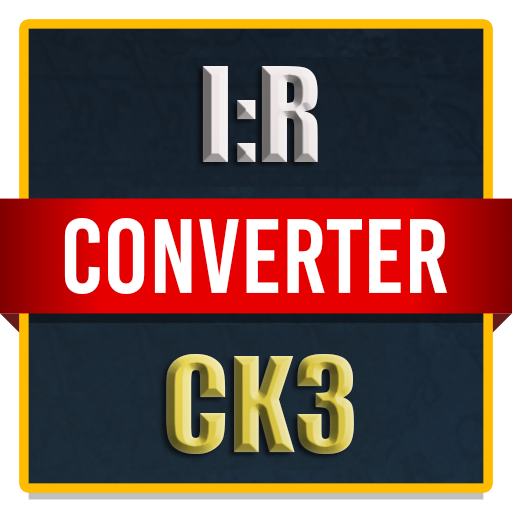
<style>
.page{position:relative;width:512px;height:512px}
.page>*{position:absolute;margin:0}
.t1{font:120.8px "Impact"}
</style>
<div class="page">
<p class="t1" style="left:166px;top:66px;width:188px;height:388px;text-align:center">I:R<br><br>CK3</p>
</div>
